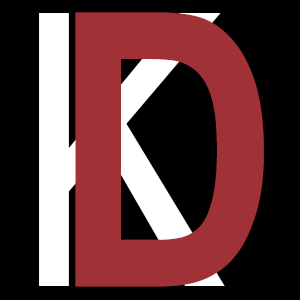
<style>
.page{position:relative;width:300px;height:300px;background:#000000}
.page>*{position:absolute;margin:0}
.t1{font:381.8px "ArialNarrow";color:#ffffff}
.t2{font:382.4px "ArialNarrow-Bold";color:#a03237}
</style>
<div class="page">
<p class="t1" style="left:39px;top:13px;width:186px;height:273px">K</p>
<p class="t2" style="left:75px;top:12px;width:189px;height:275px">D</p>
</div>
